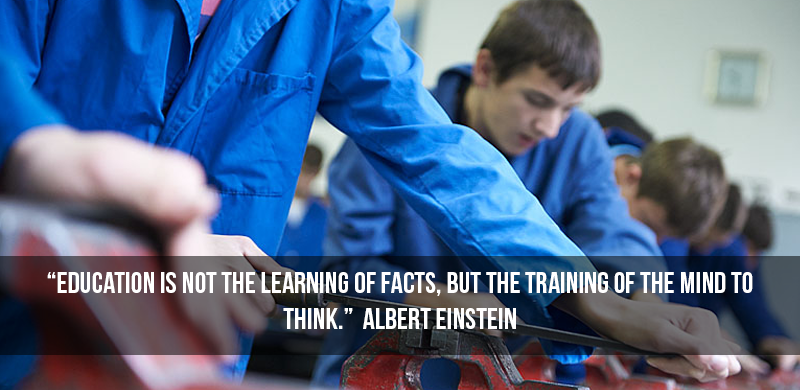
<style>
.page{position:relative;width:800px;height:390px}
.page>*{position:absolute;margin:0}
.t1{font:30px/36px "BebasNeue";color:#ffffff;text-transform:uppercase}
</style>
<div class="page">
<p class="t1" style="left:47px;top:272px;width:706px;height:57px;text-align:center">“Education is not the learning of facts, but the training of the mind to think.”  Albert Einstein</p>
</div>
